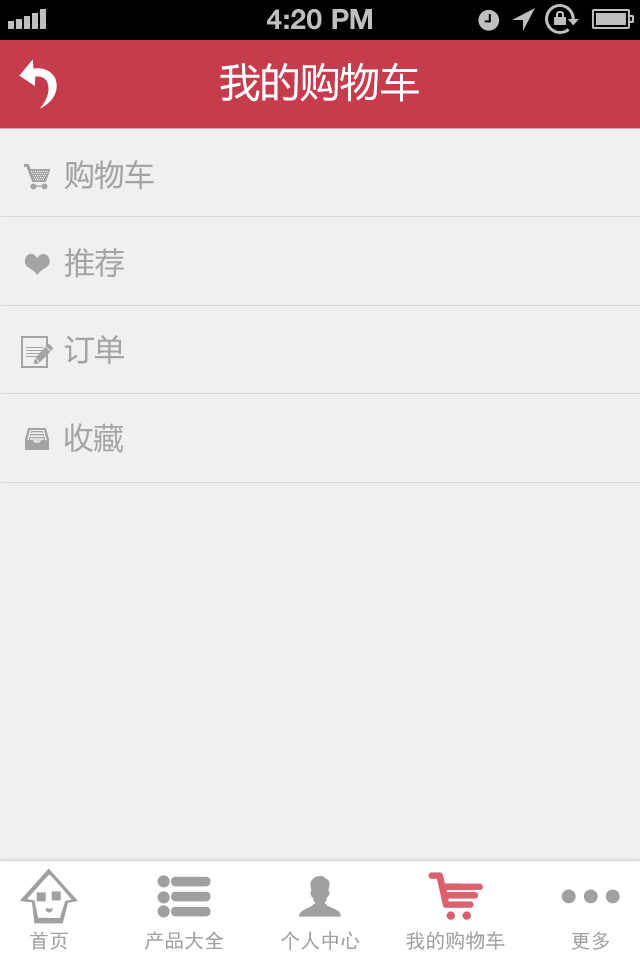
<style>
.page{position:relative;width:640px;height:960px;background:#f0f0f0}
.page>*{position:absolute;margin:0}
.t1{font:28px "HelveticaNeue-Bold";color:#bfbfbf;text-transform:uppercase}
.t2{font:40px "MicrosoftYaHei";color:#ffffff;text-transform:uppercase}
.t3{font:30px "MicrosoftYaHei";color:#a5a3a3;text-transform:uppercase}
.t4{font:20px "SimHei";color:#a0a0a0}
</style>
<div class="page">
<p class="t1" style="left:267px;top:9px;width:105px;height:21px">4:20 PM</p>
<p class="t2" style="left:220px;top:62px;width:199px;height:40px">我的购物车</p>
<p class="t3" style="left:64px;top:160px;width:90px;height:30px">购物车</p>
<p class="t3" style="left:65px;top:248px;width:59px;height:30px">推荐</p>
<p class="t3" style="left:64px;top:335px;width:60px;height:30px">订单</p>
<p class="t3" style="left:64px;top:423px;width:59px;height:30px">收藏</p>
<p class="t4" style="left:30px;top:931px;width:38px;height:19px">首页</p>
<p class="t4" style="left:145px;top:931px;width:79px;height:19px">产品大全</p>
<p class="t4" style="left:281px;top:931px;width:79px;height:19px">个人中心</p>
<p class="t4" style="left:406px;top:931px;width:99px;height:19px">我的购物车</p>
<p class="t4" style="left:572px;top:931px;width:38px;height:19px">更多</p>
</div>
